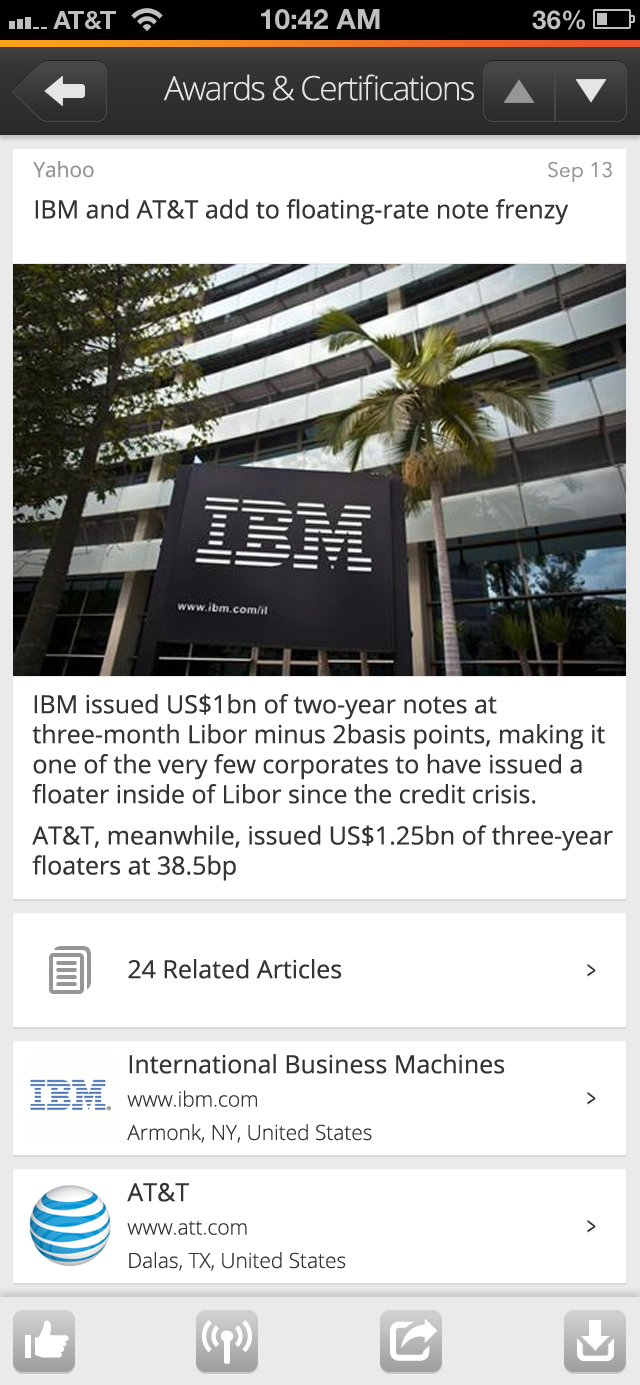
<style>
.page{position:relative;width:640px;height:1385px;background:#ffffff}
.page>*{position:absolute;margin:0}
.t1{font:33.3px "OpenSans-Light";letter-spacing:-0.05em;color:#e5e5e5}
.t2{font:25px "OpenSans";color:#343434}
.t3{font:20.8px "OpenSans";color:#969696}
.t4{font:20.8px "AvenirNext-Regular";color:#969696}
.t5{font:25px "OpenSans";color:#343434;scale:0.64 1}
.t6{font:20.8px "OpenSans-Light";color:#343434}
</style>
<div class="page">
<p class="t1" style="left:164px;top:74px;width:310px;height:27px">Awards &amp; Certifications</p>
<p class="t2" style="left:33px;top:161px;width:535px;height:64px"><span class="t3">Yahoo<br></span>IBM and AT&amp;T add to floating-rate note frenzy</p>
<p class="t4" style="left:548px;top:161px;width:64px;height:21px">Sep 13</p>
<p class="t2" style="left:32px;top:694px;width:581px;height:187px">IBM issued US$1bn of two-year notes at three-month Libor minus 2basis points, making it one of the very few corporates to have issued a floater inside of Libor since the credit crisis.<br>AT&amp;T, meanwhile, issued US$1.25bn of three-year floaters at 38.5bp</p>
<p class="t2" style="left:128px;top:959px;width:214px;height:20px">24 Related Articles</p>
<p class="t5" style="left:587px;top:964px;width:9px;height:13px">&gt;</p>
<p class="t6" style="left:127px;top:1054px;width:378px;height:89px"><span class="t2">International Business Machines<br></span>www.ibm.com<br>Armonk, NY, United States</p>
<p class="t5" style="left:587px;top:1092px;width:9px;height:13px">&gt;</p>
<p class="t6" style="left:127px;top:1183px;width:219px;height:88px"><span class="t2">AT&amp;T<br></span>www.att.com<br>Dalas, TX, United States</p>
<p class="t5" style="left:587px;top:1220px;width:9px;height:13px">&gt;</p>
</div>
